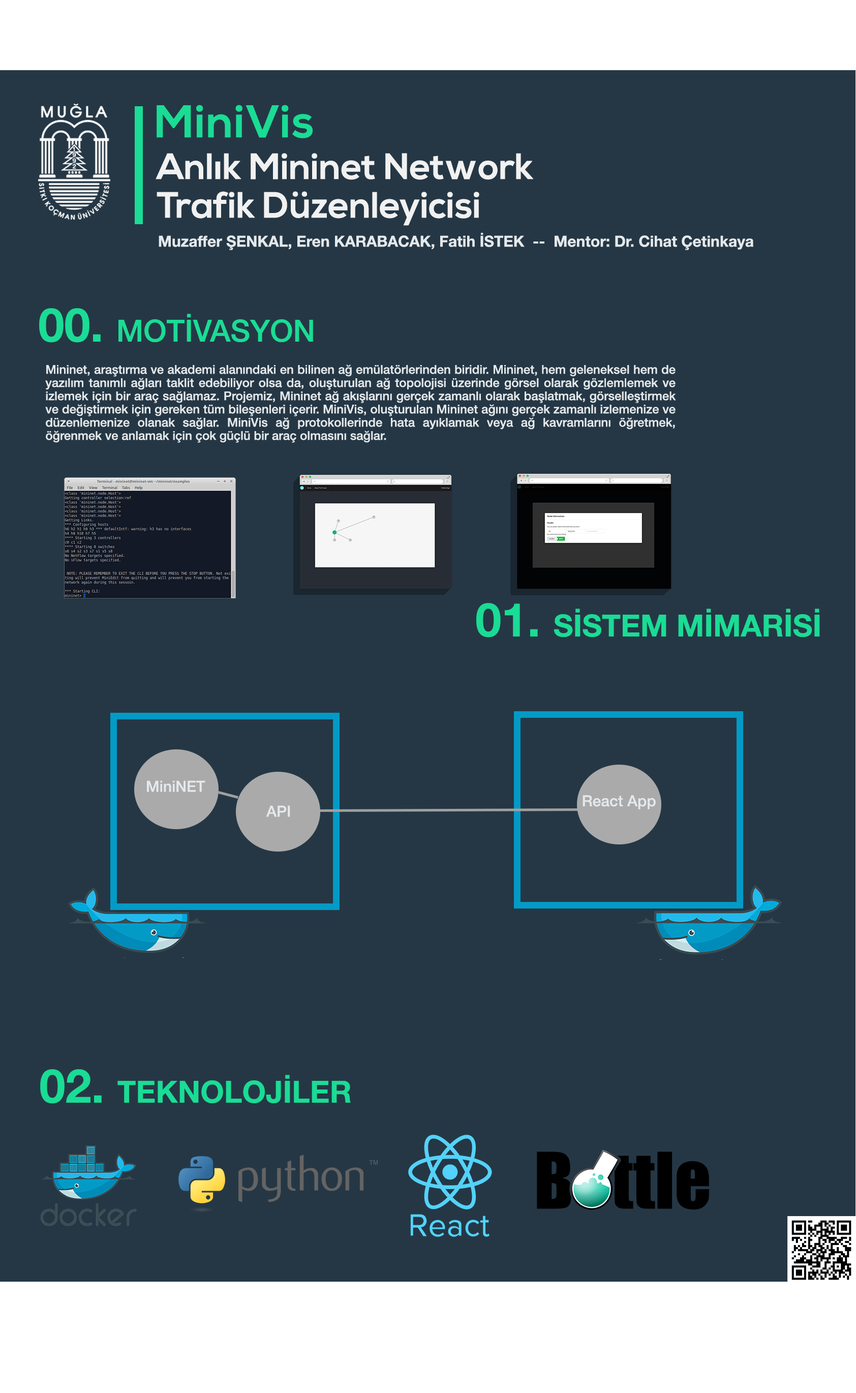
<style>
.page{position:relative;width:856px;height:1393px;background:#253745}
.page>*{position:absolute;margin:0}
.t1{font:45.8px "NexaBold";letter-spacing:0.02em;color:#1adc95}
.t2{font:36.6px/9.7px "NexaBold";color:#f1f1f1}
.t3{font:15.3px "HelveticaNeue-Bold";color:#e4e9ec}
.t4{font:30.5px "HelveticaNeue-Medium";color:#1adc95}
.t5{font:46.8px "HelveticaNeue-Bold";color:#1adc95}
.t6{font:12.2px/13.2px "HelveticaNeue-Medium";color:#e4e9ec}
.t7{font:30.5px "HelveticaNeue-Bold";color:#1adc95}
.t8{font:15.3px "HelveticaNeue-Medium";color:#e4e9ec}
</style>
<div class="page">
<p class="t1" style="left:157px;top:105px;width:156px;height:33px">MiniVis</p>
<p class="t2" style="left:156px;top:153px;width:377px;height:73px">Anlık Mininet Network <br><br><br><br>Trafik Düzenleyicisi</p>
<p class="t3" style="left:159px;top:233px;width:594px;height:17px">Muzaffer ŞENKAL, Eren KARABACAK, Fatih İSTEK  --  Mentor: Dr. Cihat Çetinkaya</p>
<p class="t4" style="left:39px;top:308px;width:274px;height:35px"><span class="t5">00. </span>MOTİVASYON</p>
<p class="t6" style="left:45px;top:364px;width:631px;height:79px;text-align:justify">Mininet, araştırma ve akademi alanındaki en bilinen ağ emülatörlerinden biridir. Mininet, hem geleneksel hem de yazılım tanımlı ağları taklit edebiliyor olsa da, oluşturulan ağ topolojisi üzerinde görsel olarak gözlemlemek ve izlemek için bir araç sağlamaz. Projemiz, Mininet ağ akışlarını gerçek zamanlı olarak başlatmak, görselleştirmek ve değiştirmek için gereken tüm bileşenleri içerir. MiniVis, oluşturulan Mininet ağını gerçek zamanlı izlemenize ve düzenlemenize olanak sağlar. MiniVis ağ protokollerinde hata ayıklamak veya ağ kavramlarını öğretmek, öğrenmek ve anlamak için çok güçlü bir araç olmasını sağlar.</p>
<p class="t7" style="left:476px;top:603px;width:344px;height:34px"><span class="t5">01. </span>SİSTEM MİMARİSİ</p>
<p class="t8" style="left:147px;top:780px;width:58px;height:12px">MiniNET</p>
<p class="t8" style="left:583px;top:795px;width:73px;height:14px">React App</p>
<p class="t8" style="left:266px;top:805px;width:24px;height:12px">API</p>
<p class="t7" style="left:40px;top:1069px;width:311px;height:35px"><span class="t5">02. </span>TEKNOLOJİLER</p>
</div>
